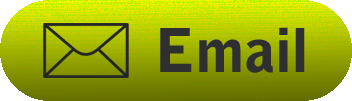
<style>
.page{position:relative;width:352px;height:101px}
.page>*{position:absolute;margin:0}
.t1{font:60px "BellGothicStd-Black";color:#302f2f}
</style>
<div class="page">
<p class="t1" style="left:160px;top:27px;width:145px;height:46px">Email</p>
</div>
